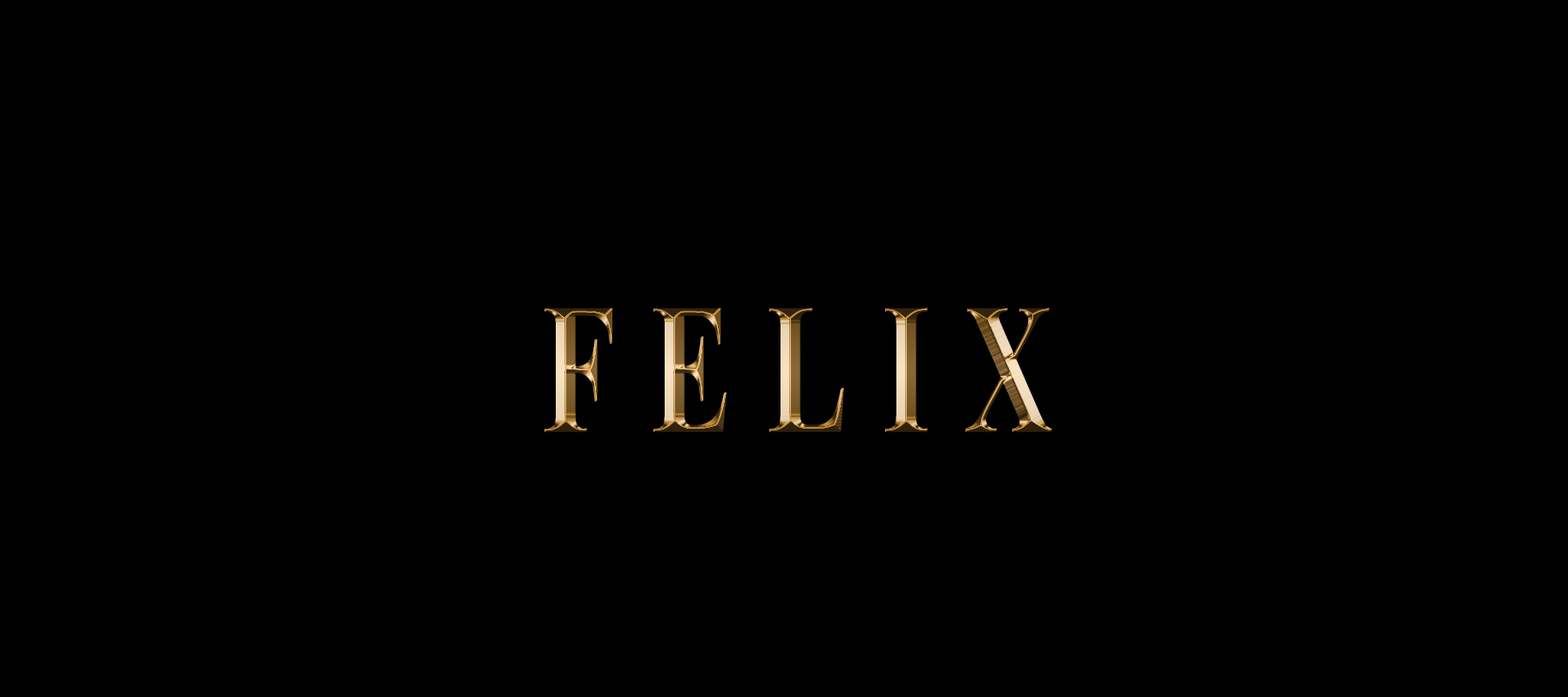
<style>
.page{position:relative;width:1568px;height:697px;background:#000000}
.page>*{position:absolute;margin:0}
.t1{font:186.4px "TimesNewRomanPS-BoldMT";letter-spacing:0.29em;scale:0.65 1}
</style>
<div class="page">
<p class="t1" style="left:544px;top:308px;width:508px;height:124px">FELIX</p>
</div>
